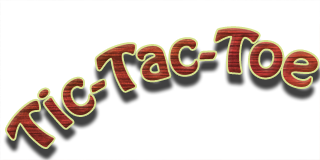
<style>
.page{position:relative;width:320px;height:160px;background:#ffffff}
.page>*{position:absolute;margin:0}
.t1{font:51.3px "HoboStd"}
</style>
<div class="page">
<p class="t1" style="left:7px;top:28px;width:311px;height:119px;rotate:-14deg">Tic-Tac-Toe</p>
</div>
